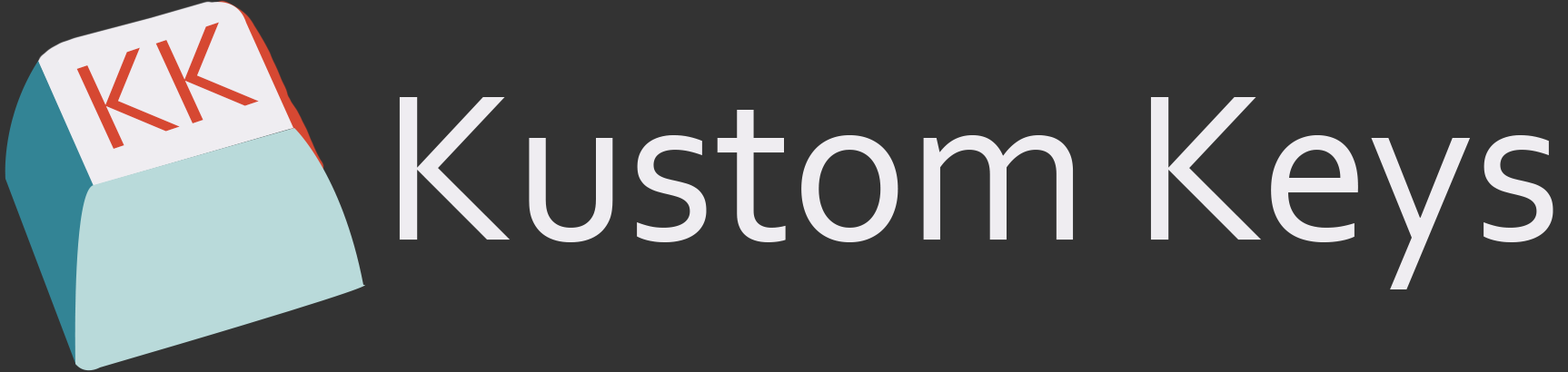
<style>
.page{position:relative;width:1568px;height:372px;background:#333333}
.page>*{position:absolute;margin:0}
.t1{font:134.5px "Corbel";color:#d64832}
.t2{font:218.6px "Corbel";color:#efedf1}
</style>
<div class="page">
<p class="t1" style="left:155px;top:22px;width:104px;height:102px;rotate:-19deg">K</p>
<p class="t1" style="left:76px;top:47px;width:104px;height:102px;rotate:-19deg">K</p>
<p class="t2" style="left:399px;top:97px;width:1154px;height:193px">Kustom Keys</p>
</div>
